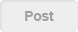
<style>
.page{position:relative;width:78px;height:32px;background:#eeeeee}
.page>*{position:absolute;margin:0}
.t1{font:14px "Arial-BoldMT";letter-spacing:-0.02em;color:#a0a0a0}
</style>
<div class="page">
<p class="t1" style="left:25px;top:11px;width:29px;height:10px">Post</p>
</div>
